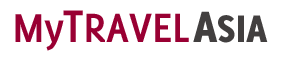
<style>
.page{position:relative;width:284px;height:57px;background:#ffffff}
.page>*{position:absolute;margin:0}
.t1{font:44px "Delicious-Bold";color:#990033}
.t2{font:45px "Delicious-Bold";color:#990033}
.t3{font:50px "Delicious-Bold";color:#990033}
.t4{font:42px "Delicious-Heavy";color:#423f3f}
.t5{font:48px "Delicious-Heavy";color:#423f3f}
</style>
<div class="page">
<p class="t1" style="left:15px;top:14px;width:49px;height:37px">My</p>
<p class="t2" style="left:63px;top:10px;width:126px;height:32px"><span class="t3">T</span>RAVEL</p>
<p class="t4" style="left:193px;top:11px;width:75px;height:32px"><span class="t5">A</span>SIA</p>
</div>
